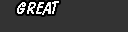
<style>
.page{position:relative;width:128px;height:32px;background:#333333}
.page>*{position:absolute;margin:0}
.t1{font:18px "DomDiagonalBT-Regular";letter-spacing:0.01em;color:#fbfbfb}
</style>
<div class="page">
<p class="t1" style="left:17px;top:1px;width:42px;height:14px">GREAT</p>
</div>
